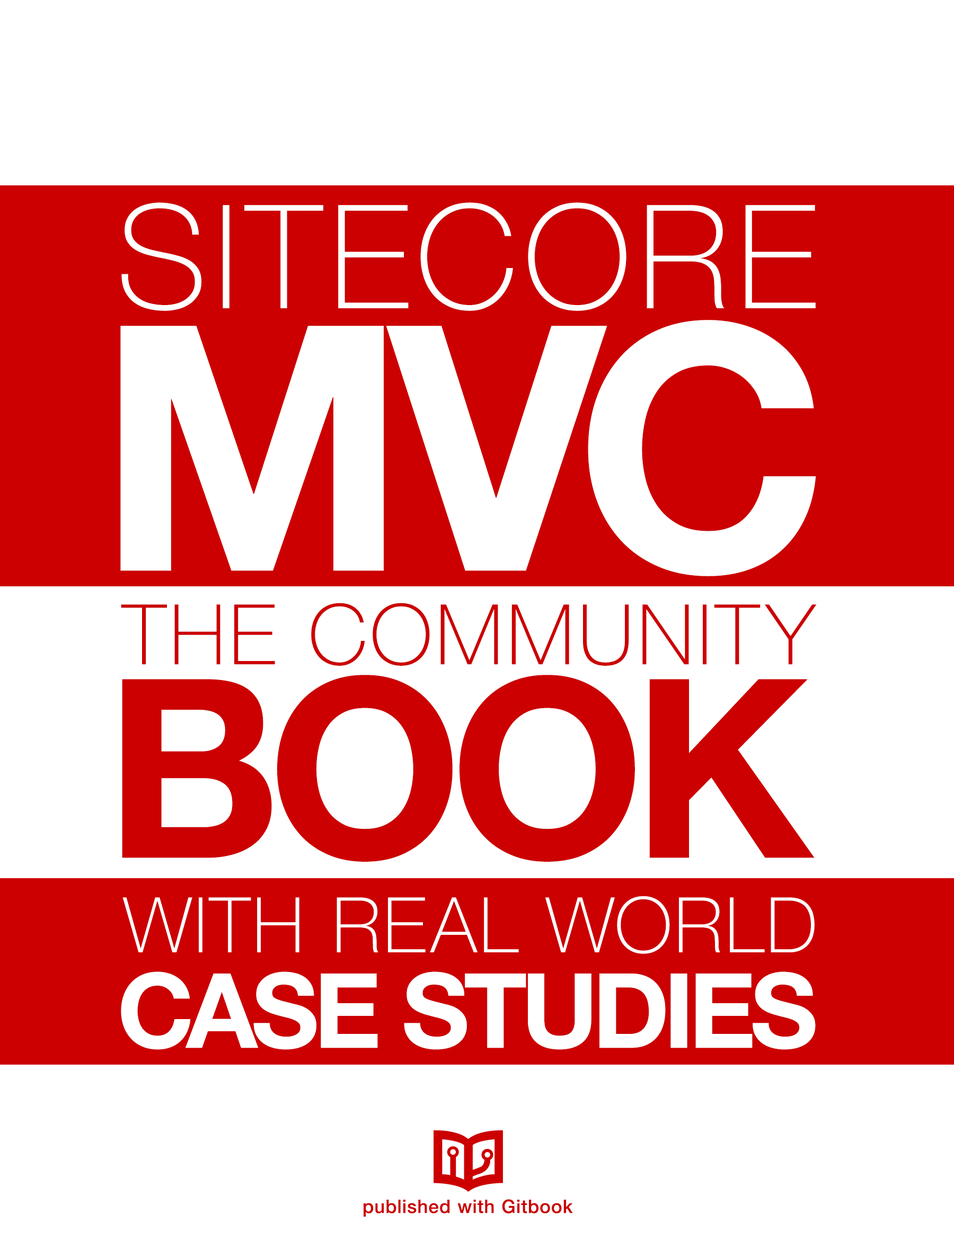
<style>
.page{position:relative;width:954px;height:1250px;background:#ffffff}
.page>*{position:absolute;margin:0}
.t1{font:144.4px "HelveticaNeue-Thin";letter-spacing:0.065em;color:#ffffff}
.t2{font:342.7px "HelveticaNeue-Bold";letter-spacing:-0.045em;color:#ffffff}
.t3{font:83.6px "HelveticaNeue-Thin";letter-spacing:0.055em;color:#cc0000}
.t4{font:250.1px "HelveticaNeue-Bold";letter-spacing:-0.03em;color:#cc0000}
.t5{font:76.7px "HelveticaNeue-Thin";letter-spacing:0.045em;color:#ffffff}
.t6{font:103.8px "HelveticaNeue-Bold";letter-spacing:-0.04em;color:#ffffff}
.t7{font:18.7px "HelveticaNeue-Medium";letter-spacing:0.045em;color:#cc0000}
</style>
<div class="page">
<p class="t1" style="left:121px;top:202px;width:694px;height:109px">SITECORE</p>
<p class="t2" style="left:120px;top:320px;width:696px;height:256px">MVC</p>
<p class="t3" style="left:121px;top:603px;width:695px;height:63px">THE COMMUNITY</p>
<p class="t4" style="left:122px;top:675px;width:692px;height:187px">BOOK</p>
<p class="t5" style="left:122px;top:896px;width:692px;height:58px">WITH REAL WORLD</p>
<p class="t6" style="left:121px;top:972px;width:694px;height:78px">CASE STUDIES</p>
<p class="t7" style="left:363px;top:1200px;width:210px;height:17px">published with Gitbook</p>
</div>
